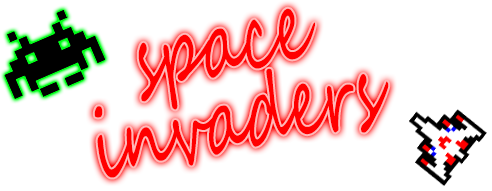
<style>
.page{position:relative;width:492px;height:191px;background:#ffffff}
.page>*{position:absolute;margin:0}
.t1{font:95.6px "SegoeScript";color:#ff0000;scale:0.66 1}
</style>
<div class="page">
<p class="t1" style="left:94px;top:8px;width:295px;height:170px;text-align:center;rotate:-12deg">space<br>invaders</p>
</div>
